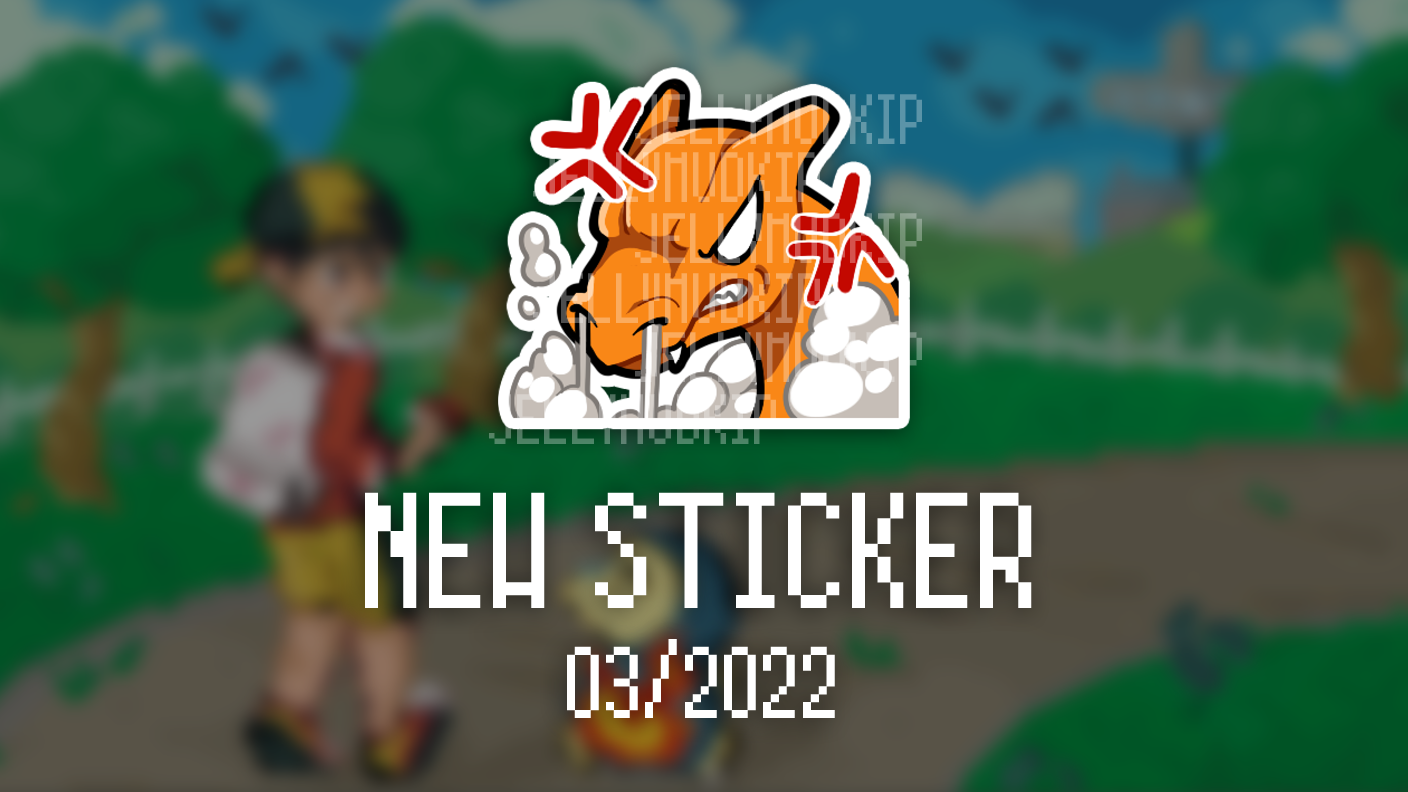
<style>
.page{position:relative;width:1408px;height:792px}
.page>*{position:absolute;margin:0}
.t1{font:167px "Power-Green-Narrow";color:#ffffff}
.t2{font:102.7px "Power-Green-Narrow";color:#ffffff}
</style>
<div class="page">
<p class="t1" style="left:365px;top:492px;width:667px;height:116px">NEW STICKER</p>
<p class="t2" style="left:567px;top:639px;width:268px;height:79px">03/2022</p>
</div>
